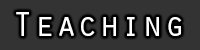
<style>
.page{position:relative;width:200px;height:50px;background:#333333}
.page>*{position:absolute;margin:0}
.t1{font:36px "OratorStd";color:#ffffff}
</style>
<div class="page">
<p class="t1" style="left:16px;top:12px;width:166px;height:24px">Teaching</p>
</div>
